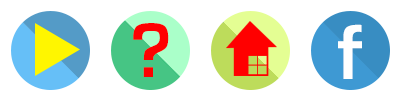
<style>
.page{position:relative;width:400px;height:100px;background:#ffffff}
.page>*{position:absolute;margin:0}
.t1{font:80px "EurostileBold";color:#ff0000}
.t2{font:80px "EurostileBold";color:#ffffff}
</style>
<div class="page">
<p class="t1" style="left:133px;top:23px;width:36px;height:54px">?</p>
<p class="t2" style="left:338px;top:24px;width:24px;height:55px">f</p>
</div>
